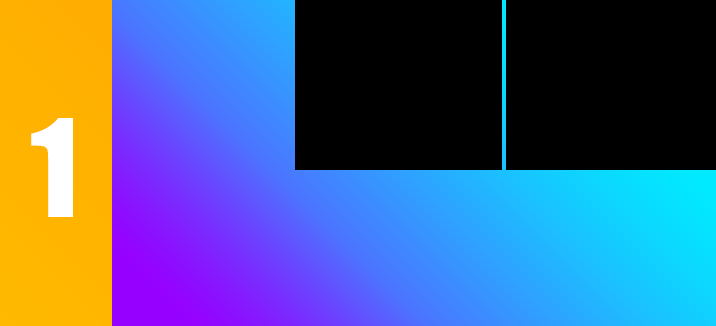
<style>
.page{position:relative;width:716px;height:326px;background:#000000}
.page>*{position:absolute;margin:0}
.t1{font:125px "Impact";color:#ffffff}
</style>
<div class="page">
<p class="t1" style="left:31px;top:118px;width:42px;height:99px">1</p>
</div>
